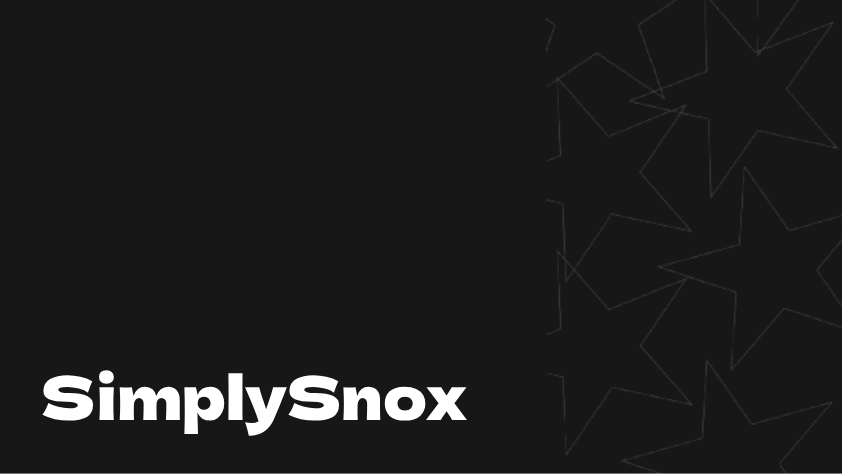
<style>
.page{position:relative;width:842px;height:474px;background:#171717}
.page>*{position:absolute;margin:0}
.t1{font:60px "DelaGothicOne-Regular";color:#ffffff}
</style>
<div class="page">
<p class="t1" style="left:42px;top:370px;width:425px;height:66px">SimplySnox</p>
</div>
